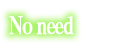
<style>
.page{position:relative;width:119px;height:48px;background:#ffffff}
.page>*{position:absolute;margin:0}
.t1{font:24px "RyuminPro-ExBold";letter-spacing:-0.1em;color:#ffffff;font-weight:bold;scale:0.8 1}
</style>
<div class="page">
<p class="t1" style="left:9px;top:16px;width:65px;height:19px">No need</p>
</div>
